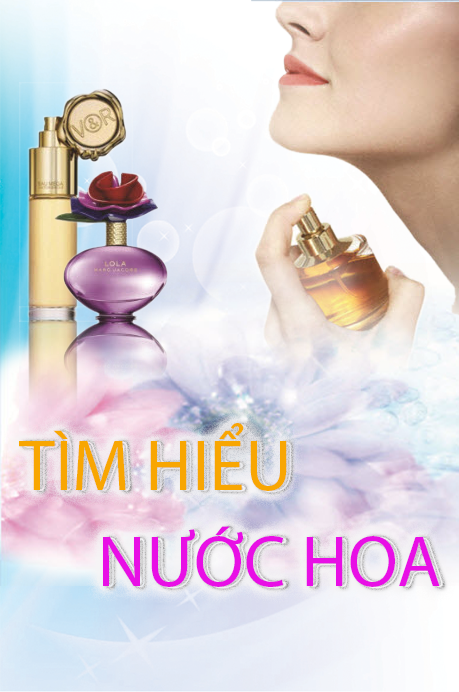
<style>
.page{position:relative;width:459px;height:692px}
.page>*{position:absolute;margin:0}
.t1{font:72px "MyriadPro-Regular";color:#f8a602}
.t2{font:72px "MyriadPro-Regular";color:#e80fe5}
</style>
<div class="page">
<p class="t1" style="left:19px;top:423px;width:268px;height:68px">TÌM HIỂU</p>
<p class="t2" style="left:103px;top:526px;width:337px;height:61px">NƯỚC HOA</p>
</div>
